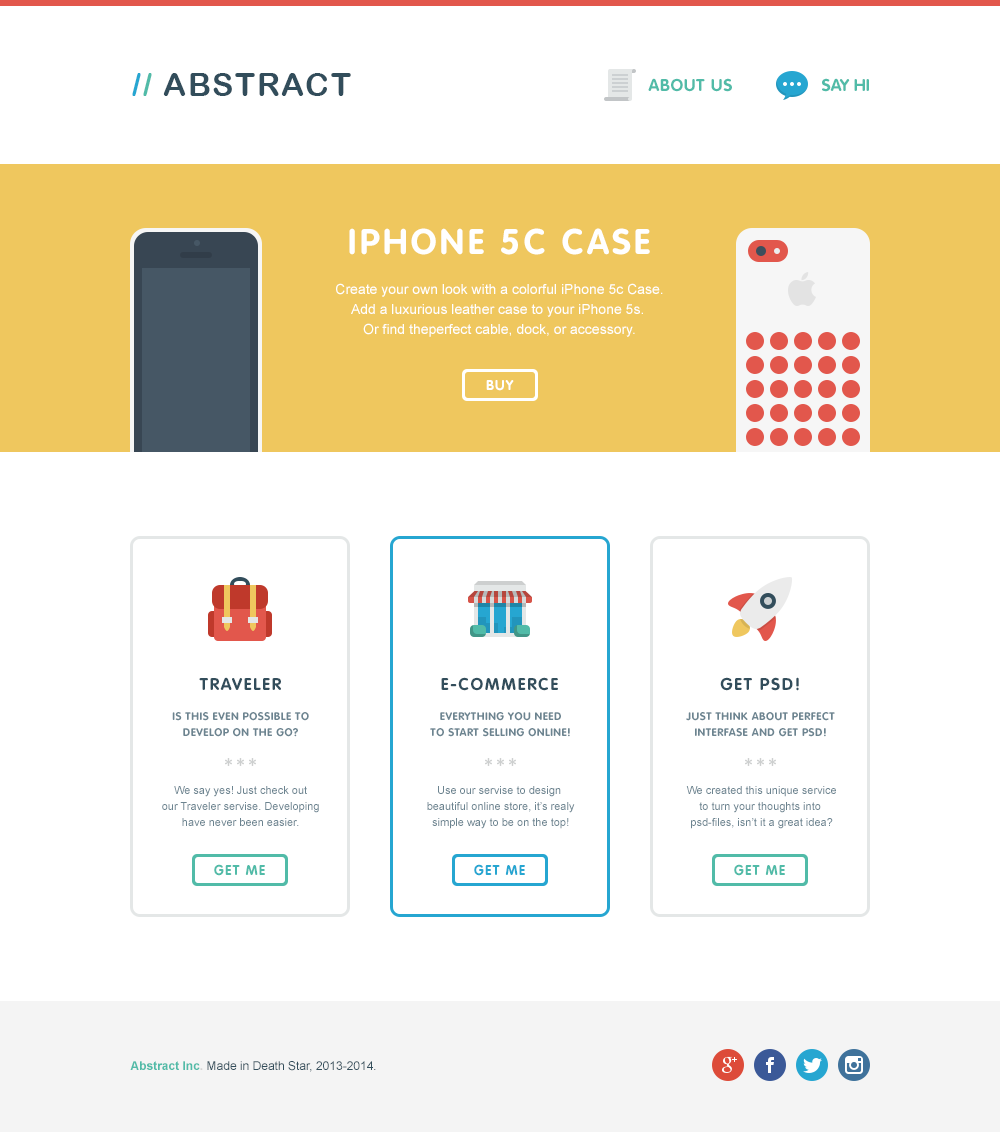
<style>
.page{position:relative;width:1000px;height:1132px;background:#ffffff}
.page>*{position:absolute;margin:0}
.t1{font:32px "ArialRoundedMTBold";letter-spacing:0.05em;color:#324d5b;text-transform:uppercase}
.t2{font:32px "ArialRoundedMTBold";letter-spacing:0.05em;color:#26a6d1;text-transform:uppercase}
.t3{font:32px "ArialRoundedMTBold";letter-spacing:0.05em;color:#51bba8;text-transform:uppercase}
.t4{font:17px "RotondaC-Bold";letter-spacing:0.05em;color:#51bba8;text-transform:uppercase}
.t5{font:17px "RotondaC-Bold";color:#51bba8;text-transform:uppercase}
.t6{font:35px "RotondaC-Bold";letter-spacing:0.1em;color:#ffffff;text-transform:uppercase}
.t7{font:14px/20px "ArialMT";color:#ffffff}
.t8{font:14px "RotondaC-Bold";letter-spacing:0.083em;color:#ffffff;text-transform:uppercase}
.t9{font:17px "RotondaC-Bold";letter-spacing:0.1em;color:#324d5b;text-transform:uppercase}
.t10{font:11px/16px "RotondaC-Bold";letter-spacing:0.05em;color:#6c8490;text-transform:uppercase}
.t11{font:11px/16px "ArialMT";color:#6c8490}
.t12{font:14px "RotondaC-Bold";letter-spacing:0.083em;color:#51bba8;text-transform:uppercase}
.t13{font:14px "RotondaC-Bold";letter-spacing:0.083em;color:#26a6d1;text-transform:uppercase}
.t14{font:12px "ArialMT";color:#324d5b}
.t15{font:12px "Arial-BoldMT";color:#51bba8}
.t16{font:12px "Arial-BoldMT";color:#d3d3d3}
</style>
<div class="page">
<p class="t1" style="left:132px;top:73px;width:219px;height:23px"><span class="t2">/</span><span class="t3">/ </span>Abstract</p>
<p class="t4" style="left:648px;top:78px;width:84px;height:14px">About us</p>
<p class="t5" style="left:822px;top:78px;width:47px;height:14px">Say hi</p>
<p class="t6" style="left:349px;top:228px;width:301px;height:27px">iPhone 5c Case</p>
<p class="t7" style="left:336px;top:283px;width:327px;height:54px;text-align:center">Create your own look with a colorful iPhone 5c Case.<br>Add a luxurious leather case to your iPhone 5s. <br>Or find theperfect cable, dock, or accessory.</p>
<p class="t8" style="left:486px;top:380px;width:28px;height:11px">BUY</p>
<p class="t9" style="left:199px;top:677px;width:82px;height:13px">TRAVELer</p>
<p class="t9" style="left:441px;top:677px;width:117px;height:14px">e-commerce</p>
<p class="t9" style="left:720px;top:677px;width:79px;height:14px">GET pSD!</p>
<p class="t10" style="left:172px;top:712px;width:137px;height:25px;text-align:center">Is this even possible to<br>develop on the go?</p>
<p class="t10" style="left:430px;top:712px;width:140px;height:25px;text-align:center">Everything you need<br>to start selling online!</p>
<p class="t10" style="left:686px;top:712px;width:149px;height:25px;text-align:center">JUST ThINK ABOUT perfect<br>INTERFASE AND get PSD!</p>
<p class="t11" style="left:162px;top:786px;width:157px;height:40px;text-align:center">We say yes! Just check out<br>our Traveler servise. Developing<br>have never been easier.</p>
<p class="t11" style="left:427px;top:786px;width:148px;height:43px;text-align:center">Use our servise to design <br>beautiful online store, it’s realy<br>simple way to be on the top!</p>
<p class="t11" style="left:686px;top:786px;width:150px;height:43px;text-align:center">We created this unique service<br>to turn your thoughts into <br>psd-files, isn’t it a great idea?</p>
<p class="t12" style="left:214px;top:864px;width:51px;height:12px">GET ME</p>
<p class="t13" style="left:474px;top:864px;width:51px;height:12px">GET ME</p>
<p class="t12" style="left:734px;top:864px;width:51px;height:12px">GET ME</p>
<p class="t14" style="left:130px;top:1061px;width:246px;height:11px"><span class="t15">Abstract Inc</span><span class="t16">. </span>Made in Death Star, 2013-2014.</p>
</div>
